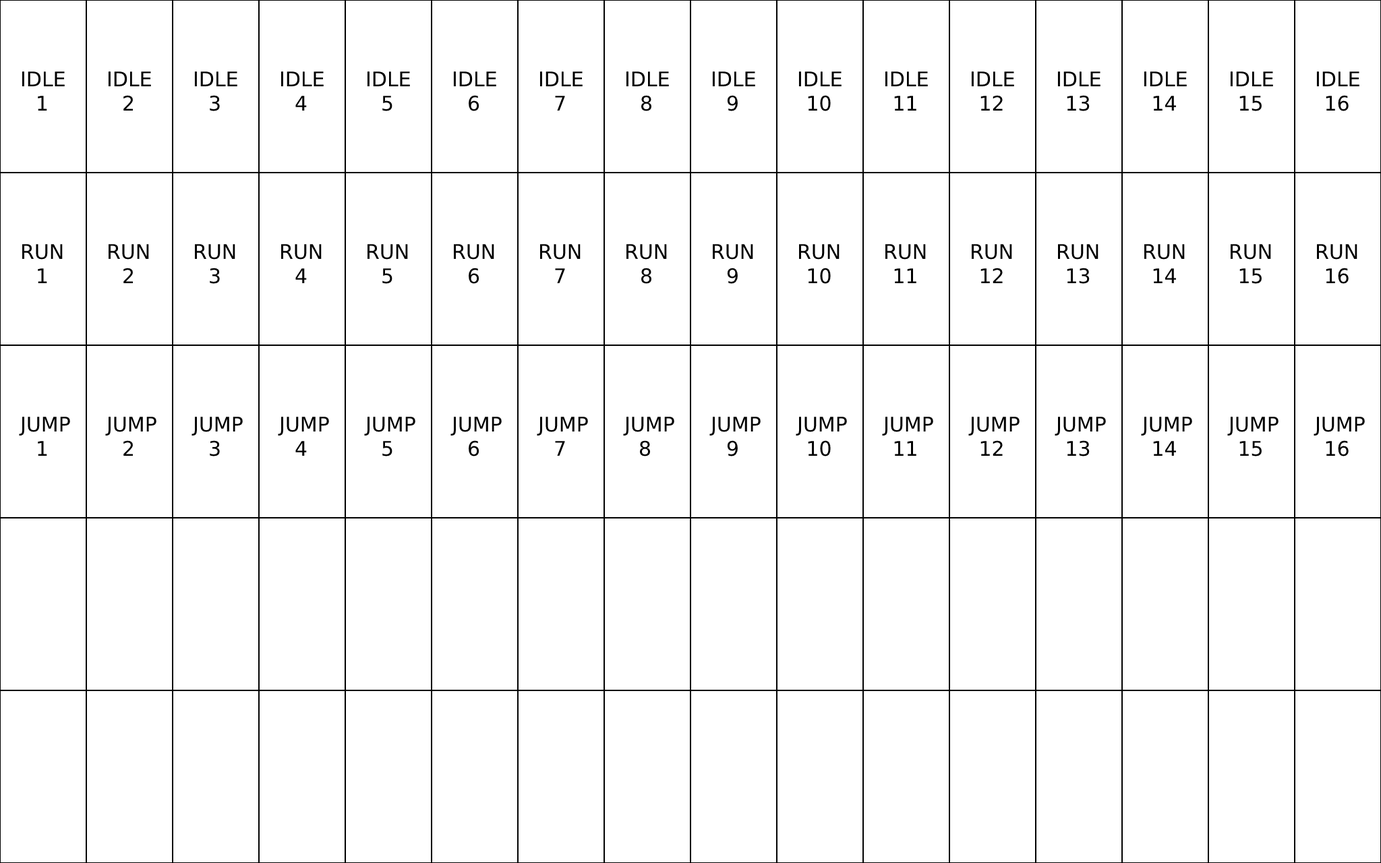
<style>
.page{position:relative;width:1381px;height:863px;background:#ffffff}
.page>*{position:absolute;margin:0}
.t1{font:20.2px "DejaVuSans";color:#000000}
</style>
<div class="page">
<p class="t1" style="left:22px;top:71px;width:43px;height:40px;text-align:center">IDLE<br>1</p>
<p class="t1" style="left:108px;top:71px;width:43px;height:40px;text-align:center">IDLE<br>2</p>
<p class="t1" style="left:194px;top:71px;width:43px;height:40px;text-align:center">IDLE<br>3</p>
<p class="t1" style="left:281px;top:71px;width:43px;height:40px;text-align:center">IDLE<br>4</p>
<p class="t1" style="left:367px;top:71px;width:43px;height:40px;text-align:center">IDLE<br>5</p>
<p class="t1" style="left:453px;top:71px;width:43px;height:40px;text-align:center">IDLE<br>6</p>
<p class="t1" style="left:540px;top:71px;width:43px;height:40px;text-align:center">IDLE<br>7</p>
<p class="t1" style="left:626px;top:71px;width:43px;height:40px;text-align:center">IDLE<br>8</p>
<p class="t1" style="left:712px;top:71px;width:43px;height:40px;text-align:center">IDLE<br>9</p>
<p class="t1" style="left:799px;top:71px;width:43px;height:40px;text-align:center">IDLE<br>10</p>
<p class="t1" style="left:885px;top:71px;width:43px;height:40px;text-align:center">IDLE<br>11</p>
<p class="t1" style="left:971px;top:71px;width:43px;height:40px;text-align:center">IDLE<br>12</p>
<p class="t1" style="left:1058px;top:71px;width:43px;height:40px;text-align:center">IDLE<br>13</p>
<p class="t1" style="left:1144px;top:71px;width:43px;height:40px;text-align:center">IDLE<br>14</p>
<p class="t1" style="left:1230px;top:71px;width:43px;height:40px;text-align:center">IDLE<br>15</p>
<p class="t1" style="left:1317px;top:71px;width:43px;height:40px;text-align:center">IDLE<br>16</p>
<p class="t1" style="left:22px;top:244px;width:41px;height:39px;text-align:center">RUN<br>1</p>
<p class="t1" style="left:108px;top:244px;width:41px;height:39px;text-align:center">RUN<br>2</p>
<p class="t1" style="left:194px;top:244px;width:41px;height:40px;text-align:center">RUN<br>3</p>
<p class="t1" style="left:281px;top:244px;width:41px;height:39px;text-align:center">RUN<br>4</p>
<p class="t1" style="left:367px;top:244px;width:41px;height:40px;text-align:center">RUN<br>5</p>
<p class="t1" style="left:453px;top:244px;width:41px;height:40px;text-align:center">RUN<br>6</p>
<p class="t1" style="left:540px;top:244px;width:41px;height:39px;text-align:center">RUN<br>7</p>
<p class="t1" style="left:626px;top:244px;width:41px;height:40px;text-align:center">RUN<br>8</p>
<p class="t1" style="left:712px;top:244px;width:41px;height:40px;text-align:center">RUN<br>9</p>
<p class="t1" style="left:799px;top:244px;width:41px;height:40px;text-align:center">RUN<br>10</p>
<p class="t1" style="left:885px;top:244px;width:41px;height:39px;text-align:center">RUN<br>11</p>
<p class="t1" style="left:971px;top:244px;width:41px;height:39px;text-align:center">RUN<br>12</p>
<p class="t1" style="left:1058px;top:244px;width:41px;height:40px;text-align:center">RUN<br>13</p>
<p class="t1" style="left:1144px;top:244px;width:41px;height:39px;text-align:center">RUN<br>14</p>
<p class="t1" style="left:1230px;top:244px;width:41px;height:40px;text-align:center">RUN<br>15</p>
<p class="t1" style="left:1317px;top:244px;width:41px;height:40px;text-align:center">RUN<br>16</p>
<p class="t1" style="left:19px;top:417px;width:51px;height:39px;text-align:center">JUMP<br>1</p>
<p class="t1" style="left:105px;top:417px;width:51px;height:39px;text-align:center">JUMP<br>2</p>
<p class="t1" style="left:192px;top:417px;width:51px;height:40px;text-align:center">JUMP<br>3</p>
<p class="t1" style="left:278px;top:417px;width:51px;height:39px;text-align:center">JUMP<br>4</p>
<p class="t1" style="left:364px;top:417px;width:51px;height:40px;text-align:center">JUMP<br>5</p>
<p class="t1" style="left:451px;top:417px;width:51px;height:40px;text-align:center">JUMP<br>6</p>
<p class="t1" style="left:537px;top:417px;width:51px;height:39px;text-align:center">JUMP<br>7</p>
<p class="t1" style="left:623px;top:417px;width:51px;height:40px;text-align:center">JUMP<br>8</p>
<p class="t1" style="left:710px;top:417px;width:51px;height:40px;text-align:center">JUMP<br>9</p>
<p class="t1" style="left:796px;top:417px;width:51px;height:40px;text-align:center">JUMP<br>10</p>
<p class="t1" style="left:882px;top:417px;width:51px;height:39px;text-align:center">JUMP<br>11</p>
<p class="t1" style="left:969px;top:417px;width:51px;height:39px;text-align:center">JUMP<br>12</p>
<p class="t1" style="left:1055px;top:417px;width:51px;height:40px;text-align:center">JUMP<br>13</p>
<p class="t1" style="left:1141px;top:417px;width:51px;height:39px;text-align:center">JUMP<br>14</p>
<p class="t1" style="left:1227px;top:417px;width:52px;height:40px;text-align:center">JUMP<br>15</p>
<p class="t1" style="left:1314px;top:417px;width:51px;height:40px;text-align:center">JUMP<br>16</p>
</div>
